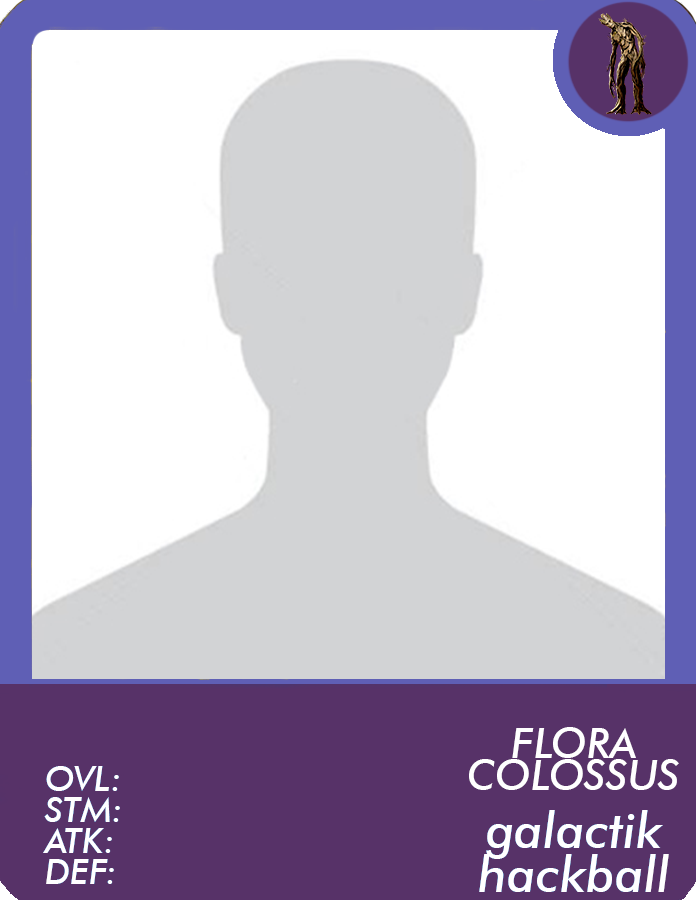
<style>
.page{position:relative;width:696px;height:900px;background:#ffffff}
.page>*{position:absolute;margin:0}
.t1{font:42px "FuturaBT-MediumItalic";color:#ffffff}
.t2{font:35px/31px "FuturaBT-MediumItalic";color:#ffffff}
.t3{font:50.3px/44.7px "FuturaBT-MediumItalic";color:#ffffff}
</style>
<div class="page">
<p class="t1" style="left:469px;top:727px;width:210px;height:63px">FLORA COLOSSUS</p>
<p class="t2" style="left:43px;top:766px;width:77px;height:118px">OVL:<br>STM:<br>ATK:<br>DEF:</p>
<p class="t3" style="left:479px;top:810px;width:190px;height:82px;text-align:center">galactik<br>hackball</p>
</div>
